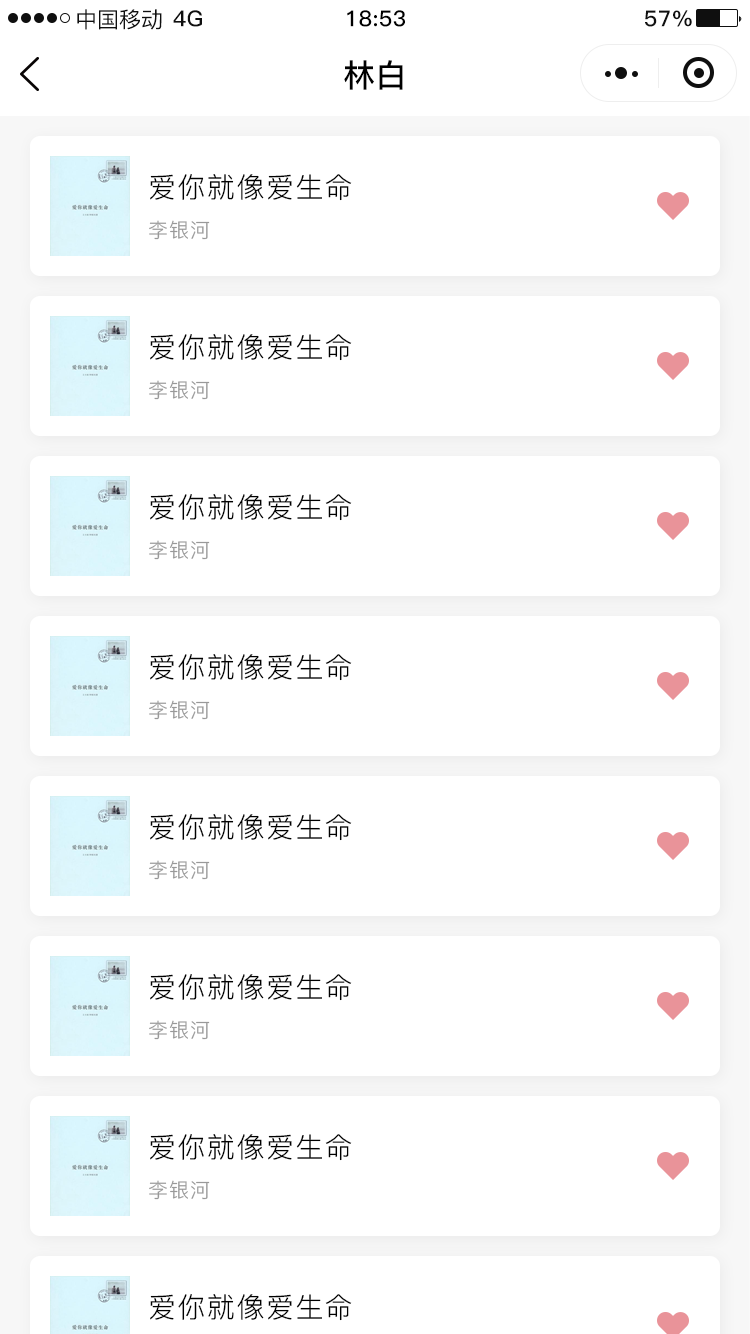
<style>
.page{position:relative;width:750px;height:1334px;background:#ffffff}
.page>*{position:absolute;margin:0}
.t1{font:22px "PingFang-SC-Medium";color:#0f0f0f}
.t2{font:22px "PingFang-SC-Bold";letter-spacing:0.025em;color:#0f0f0f}
.t3{font:22px "PingFang-SC-Bold";letter-spacing:0.025em;color:#000000}
.t4{font:32px "PingFang-SC-Bold";color:#000000}
.t5{font:28px "PingFang-SC-Regular";letter-spacing:0.05em;color:#000000}
.t6{font:20px "PingFang-SC-Regular";letter-spacing:0.05em;color:#999999}
</style>
<div class="page">
<p class="t1" style="left:77px;top:9px;width:85px;height:21px">中国移动</p>
<p class="t2" style="left:173px;top:10px;width:29px;height:17px">4G</p>
<p class="t3" style="left:347px;top:10px;width:58px;height:17px">18:53</p>
<p class="t2" style="left:645px;top:10px;width:47px;height:17px">57%</p>
<p class="t4" style="left:344px;top:60px;width:59px;height:30px">林白</p>
<p class="t5" style="left:150px;top:174px;width:202px;height:27px">爱你就像爱生命</p>
<p class="t6" style="left:149px;top:220px;width:61px;height:20px">李银河</p>
<p class="t5" style="left:150px;top:334px;width:202px;height:27px">爱你就像爱生命</p>
<p class="t6" style="left:149px;top:380px;width:61px;height:20px">李银河</p>
<p class="t5" style="left:150px;top:494px;width:202px;height:27px">爱你就像爱生命</p>
<p class="t6" style="left:149px;top:540px;width:61px;height:20px">李银河</p>
<p class="t5" style="left:150px;top:654px;width:202px;height:27px">爱你就像爱生命</p>
<p class="t6" style="left:149px;top:700px;width:61px;height:20px">李银河</p>
<p class="t5" style="left:150px;top:814px;width:202px;height:27px">爱你就像爱生命</p>
<p class="t6" style="left:149px;top:860px;width:61px;height:20px">李银河</p>
<p class="t5" style="left:150px;top:974px;width:202px;height:27px">爱你就像爱生命</p>
<p class="t6" style="left:149px;top:1020px;width:61px;height:20px">李银河</p>
<p class="t5" style="left:150px;top:1134px;width:202px;height:27px">爱你就像爱生命</p>
<p class="t6" style="left:149px;top:1180px;width:61px;height:20px">李银河</p>
<p class="t5" style="left:150px;top:1294px;width:202px;height:27px">爱你就像爱生命</p>
</div>
